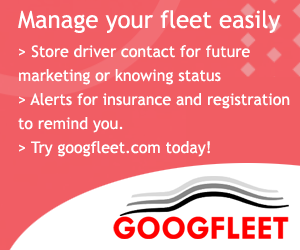
<style>
.page{position:relative;width:300px;height:250px;background:#f15d64}
.page>*{position:absolute;margin:0}
.t1{font:24px "TrebuchetMS";color:#ffffff}
.t2{font:16px/24px "TrebuchetMS";color:#ffffff}
</style>
<div class="page">
<p class="t1" style="left:18px;top:10px;width:263px;height:23px">Manage your fleet easily</p>
<p class="t2" style="left:18px;top:45px;width:272px;height:112px">&gt; Store driver contact for future <br>marketing or knowing status<br>&gt; Alerts for insurance and registration<br>to remind you.<br>&gt; Try googfleet.com today!</p>
</div>
